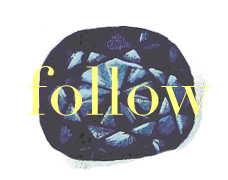
<style>
.page{position:relative;width:228px;height:180px;background:#ffffff}
.page>*{position:absolute;margin:0}
.t1{font:66.7px "Didot";color:#ffff80}
</style>
<div class="page">
<p class="t1" style="left:27px;top:66px;width:185px;height:51px">follow</p>
</div>
